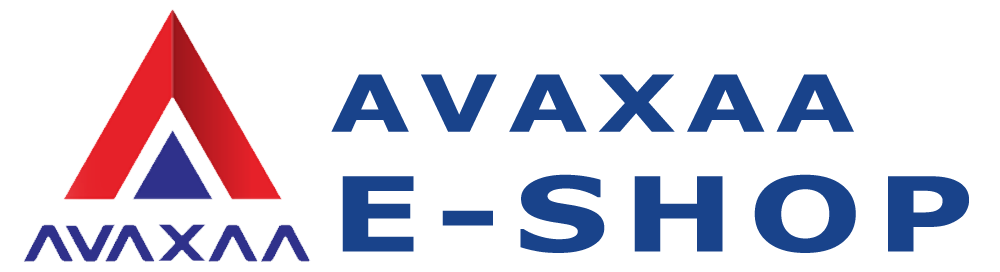
<style>
.page{position:relative;width:1000px;height:272px;background:#ffffff}
.page>*{position:absolute;margin:0}
.t1{font:78.3px/119.7px "Verdana-Bold";letter-spacing:0.1em;color:#19438b;scale:1.3 1}
.t2{font:103px/119.7px "Verdana-Bold";letter-spacing:0.1em;color:#19438b;scale:1.3 1}
</style>
<div class="page">
<p class="t1" style="left:331px;top:74px;width:638px;height:179px">AVAXAA<br><span class="t2">E-SHOP</span></p>
</div>
